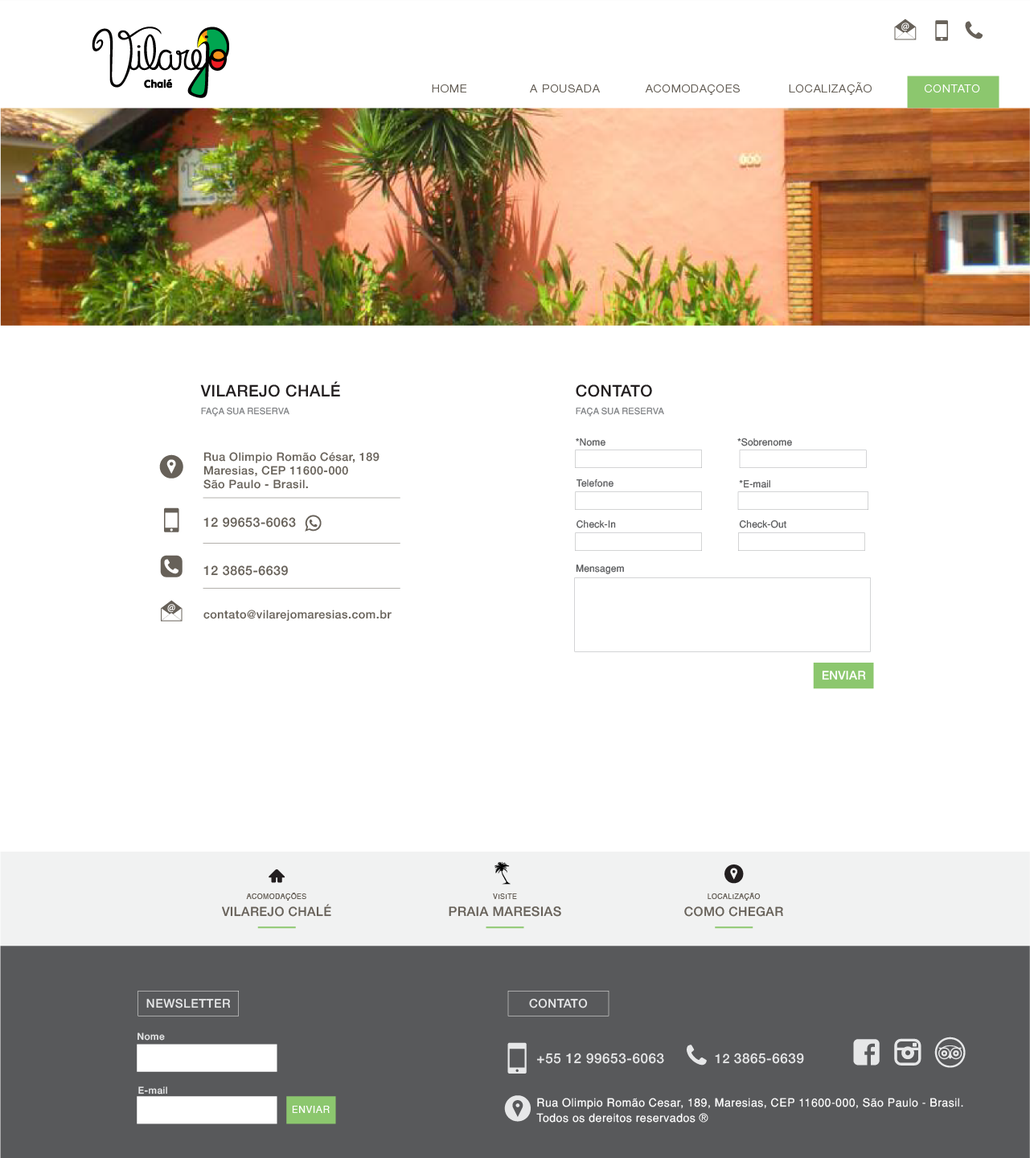
<style>
.page{position:relative;width:1030px;height:1158px;background:#ffffff}
.page>*{position:absolute;margin:0}
.t1{font:11.3px "HelveticaNeueLTStd-Lt";letter-spacing:0.075em;color:#676159}
.t2{font:11.3px "HelveticaNeueLTStd-Lt";letter-spacing:0.075em;color:#ffffff}
.t3{font:8.8px/17.7px "Helvetica-Normal";letter-spacing:0.011em;color:#808285}
.t4{font:16.1px/17.7px "Helvetica65-Medium";letter-spacing:0.025em;color:#231f20}
.t5{font:9.6px "Helvetica-Normal";letter-spacing:0.011em;color:#58595b}
.t6{font:11.5px "Helvetica65-Medium";letter-spacing:0.035em;color:#676159}
.t7{font:12.8px "Helvetica65-Medium";letter-spacing:0.035em;color:#676159}
.t8{font:12.1px "Helvetica65-Medium";letter-spacing:0.011em;color:#ffffff}
.t9{font:7px "Helvetica";letter-spacing:0.05em;color:#676159}
.t10{font:12.6px "Helvetica65-Medium";letter-spacing:0.025em;color:#676159}
.t11{font:13px "Helvetica65-Medium";letter-spacing:0.025em;color:#676159}
.t12{font:12.1px "Helvetica65-Medium";letter-spacing:0.035em;color:#e6e7e8}
.t13{font:9.6px "Helvetica65-Medium";letter-spacing:0.035em;color:#e6e7e8}
.t14{font:13.7px "Helvetica65-Medium";letter-spacing:0.035em;color:#e6e7e8}
.t15{font:12.9px "Helvetica65-Medium";letter-spacing:0.035em;color:#e6e7e8}
.t16{font:11.3px/15.3px "Helvetica-Normal";letter-spacing:0.037em;color:#ffffff}
.t17{font:9.6px "HelveticaNeue";letter-spacing:0.075em;color:#ffffff}
</style>
<div class="page">
<p class="t1" style="left:432px;top:84px;width:34px;height:8px">HOME</p>
<p class="t1" style="left:530px;top:84px;width:70px;height:8px">A POUSADA</p>
<p class="t1" style="left:645px;top:84px;width:95px;height:11px">ACOMODAÇOES</p>
<p class="t1" style="left:789px;top:82px;width:83px;height:13px">LOCALIZAÇÃO</p>
<p class="t2" style="left:925px;top:84px;width:55px;height:8px">CONTATO</p>
<p class="t3" style="left:200px;top:381px;width:140px;height:35px"><span class="t4">VILAREJO CHALÉ<br></span>FAÇA SUA RESERVA</p>
<p class="t3" style="left:576px;top:384px;width:88px;height:32px"><span class="t4">CONTATO<br></span>FAÇA SUA RESERVA</p>
<p class="t5" style="left:576px;top:437px;width:29px;height:9px">*Nome</p>
<p class="t5" style="left:737px;top:437px;width:55px;height:9px">*Sobrenome</p>
<p class="t6" style="left:203px;top:452px;width:176px;height:37px">Rua Olimpio Romão César, 189<br>Maresias, CEP 11600-000<br>São Paulo - Brasil.</p>
<p class="t5" style="left:576px;top:478px;width:37px;height:9px">Telefone</p>
<p class="t5" style="left:739px;top:479px;width:31px;height:9px">*E-mail</p>
<p class="t7" style="left:203px;top:517px;width:93px;height:10px">12 99653-6063</p>
<p class="t5" style="left:576px;top:519px;width:40px;height:9px">Check-In</p>
<p class="t5" style="left:739px;top:519px;width:47px;height:9px">Check-Out</p>
<p class="t7" style="left:203px;top:565px;width:85px;height:11px">12 3865-6639</p>
<p class="t5" style="left:576px;top:564px;width:48px;height:10px">Mensagem</p>
<p class="t6" style="left:203px;top:609px;width:189px;height:12px">contato@vilarejomaresias.com.br</p>
<p class="t8" style="left:822px;top:671px;width:44px;height:9px">ENVIAR</p>
<p class="t9" style="left:246px;top:892px;width:60px;height:8px">ACOMODAÇÕES</p>
<p class="t9" style="left:493px;top:893px;width:24px;height:6px">VISITE</p>
<p class="t9" style="left:708px;top:892px;width:53px;height:8px">LOCALIZAÇÃO</p>
<p class="t10" style="left:222px;top:904px;width:109px;height:13px">VILAREJO CHALÉ</p>
<p class="t11" style="left:449px;top:906px;width:112px;height:11px">PRAIA MARESIAS</p>
<p class="t10" style="left:684px;top:906px;width:99px;height:11px">COMO CHEGAR</p>
<p class="t12" style="left:146px;top:998px;width:84px;height:10px">NEWSLETTER</p>
<p class="t12" style="left:529px;top:998px;width:59px;height:10px">CONTATO</p>
<p class="t13" style="left:137px;top:1032px;width:28px;height:8px">Nome</p>
<p class="t14" style="left:536px;top:1052px;width:128px;height:12px">+55 12 99653-6063</p>
<p class="t14" style="left:715px;top:1052px;width:89px;height:12px"><span class="t15">12 </span>3865-6639</p>
<p class="t13" style="left:138px;top:1086px;width:29px;height:8px">E-mail</p>
<p class="t16" style="left:536px;top:1097px;width:427px;height:25px">Rua Olimpio Romão Cesar, 189, Maresias, CEP 11600-000, São Paulo - Brasil.<br>Todos os dereitos reservados ®</p>
<p class="t17" style="left:292px;top:1106px;width:38px;height:7px">ENVIAR</p>
</div>
